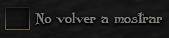
<style>
.page{position:relative;width:169px;height:38px}
.page>*{position:absolute;margin:0}
.t1{font:14.6px "Folkard";color:#88837e}
</style>
<div class="page">
<p class="t1" style="left:35px;top:12px;width:128px;height:13px">No volver a mostrar</p>
</div>
